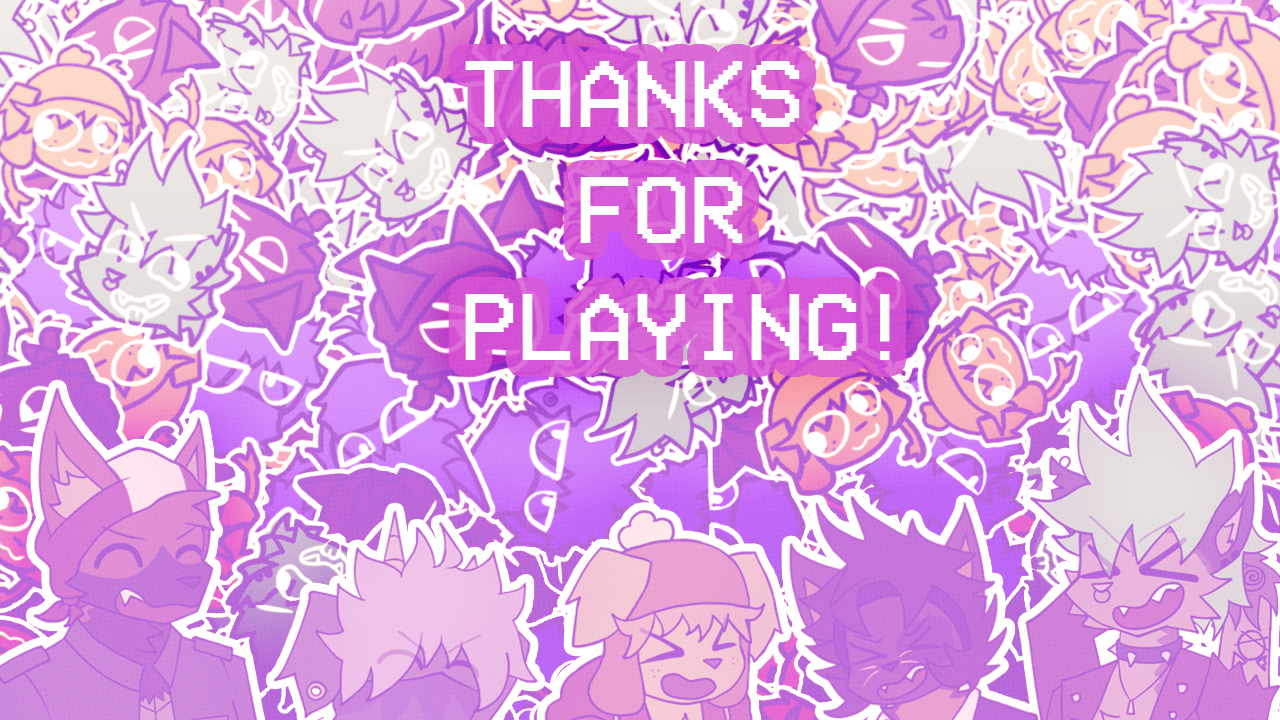
<style>
.page{position:relative;width:1280px;height:720px}
.page>*{position:absolute;margin:0}
.t1{font:97.4px "VCROSDMono";color:#ffffff}
</style>
<div class="page">
<p class="t1" style="left:465px;top:61px;width:425px;height:299px;text-align:center">THANKS <br>FOR<br> PLAYING!</p>
</div>
